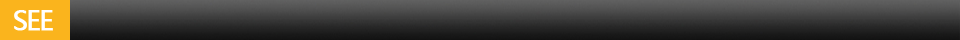
<style>
.page{position:relative;width:960px;height:40px}
.page>*{position:absolute;margin:0}
.t1{font:26.7px "MicrosoftYaHei";letter-spacing:0.04em;color:#ffffff;font-weight:bold;scale:0.97 1}
</style>
<div class="page">
<p class="t1" style="left:14px;top:10px;width:39px;height:21px">SEE</p>
</div>
